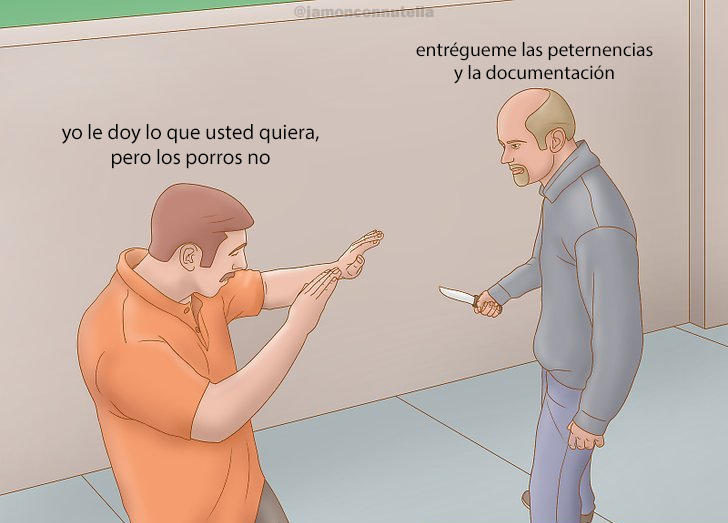
<style>
.page{position:relative;width:728px;height:523px}
.page>*{position:absolute;margin:0}
.t1{font:16.1px "FranklinGothic-Heavy";color:#b8ada5}
.t2{font:19.7px "MyriadPro-Regular";color:#000000}
.t3{font:21.2px "MyriadPro-Regular";color:#000000}
</style>
<div class="page">
<p class="t1" style="left:294px;top:6px;width:140px;height:14px">@jamonconnutella</p>
<p class="t2" style="left:416px;top:42px;width:237px;height:42px;text-align:center">entrégueme las peternencias<br>y la documentación</p>
<p class="t3" style="left:61px;top:124px;width:258px;height:45px;text-align:center">yo le doy lo que usted quiera,<br>pero los porros no</p>
</div>
